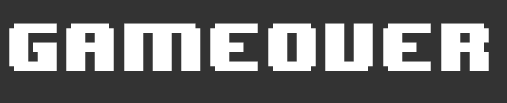
<style>
.page{position:relative;width:507px;height:103px;background:#333333}
.page>*{position:absolute;margin:0}
.t1{font:57px "8BITWONDERNominal";letter-spacing:0.01em;color:#ffffff}
</style>
<div class="page">
<p class="t1" style="left:9px;top:23px;width:480px;height:48px">GAMEOVER</p>
</div>
